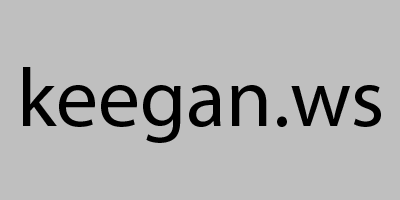
<style>
.page{position:relative;width:400px;height:200px;background:#bfbfbf}
.page>*{position:absolute;margin:0}
.t1{font:83.3px "MyriadPro-Regular";color:#000000}
</style>
<div class="page">
<p class="t1" style="left:23px;top:67px;width:358px;height:76px">keegan.ws</p>
</div>
